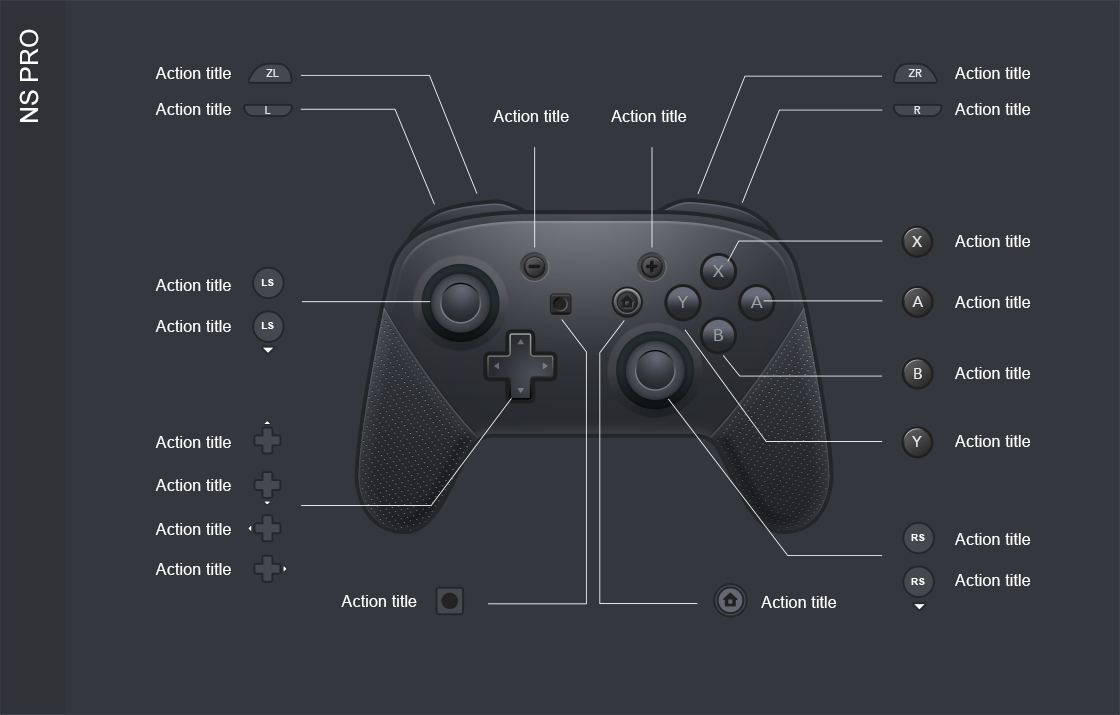
<style>
.page{position:relative;width:1120px;height:715px;background:#35373e}
.page>*{position:absolute;margin:0}
.t1{font:25px "ArialMT";color:#ffffff}
.t2{font:16.4px "ArialMT";color:#ffffff}
.t3{font:10.9px "Avenir-Medium";color:#e7e9eb}
.t4{font:15.5px "Avenir-Medium";color:#e7e9eb}
.t5{font:16.7px "Avenir-Roman";color:#9aa0a3}
.t6{font:10.5px "Arial-BoldMT";color:#ffffff}
</style>
<div class="page">
<p class="t1" style="left:19px;top:29px;width:20px;height:93px;rotate:-90deg">NS PRO</p>
<p class="t2" style="left:155px;top:67px;width:76px;height:12px">Action title</p>
<p class="t3" style="left:266px;top:69px;width:13px;height:8px">ZL</p>
<p class="t3" style="left:908px;top:69px;width:14px;height:8px">ZR</p>
<p class="t2" style="left:955px;top:67px;width:76px;height:12px">Action title</p>
<p class="t2" style="left:155px;top:103px;width:76px;height:12px">Action title</p>
<p class="t3" style="left:265px;top:106px;width:6px;height:8px">L</p>
<p class="t2" style="left:493px;top:110px;width:76px;height:12px">Action title</p>
<p class="t2" style="left:611px;top:110px;width:76px;height:12px">Action title</p>
<p class="t3" style="left:914px;top:106px;width:7px;height:8px">R</p>
<p class="t2" style="left:955px;top:103px;width:76px;height:12px">Action title</p>
<p class="t4" style="left:912px;top:236px;width:10px;height:11px">X</p>
<p class="t2" style="left:955px;top:235px;width:76px;height:12px">Action title</p>
<p class="t5" style="left:713px;top:265px;width:11px;height:12px">X</p>
<p class="t2" style="left:155px;top:279px;width:76px;height:12px">Action title</p>
<p class="t6" style="left:261px;top:279px;width:13px;height:7px">LS</p>
<p class="t5" style="left:677px;top:296px;width:11px;height:12px">Y</p>
<p class="t5" style="left:750px;top:296px;width:13px;height:12px">A</p>
<p class="t4" style="left:912px;top:296px;width:11px;height:11px">A</p>
<p class="t2" style="left:955px;top:296px;width:76px;height:12px">Action title</p>
<p class="t2" style="left:155px;top:320px;width:76px;height:12px">Action title</p>
<p class="t6" style="left:261px;top:322px;width:13px;height:7px">LS</p>
<p class="t5" style="left:714px;top:329px;width:9px;height:12px">B</p>
<p class="t4" style="left:914px;top:368px;width:8px;height:11px">B</p>
<p class="t2" style="left:955px;top:367px;width:76px;height:12px">Action title</p>
<p class="t2" style="left:155px;top:436px;width:76px;height:12px">Action title</p>
<p class="t4" style="left:912px;top:436px;width:10px;height:11px">Y</p>
<p class="t2" style="left:955px;top:435px;width:76px;height:12px">Action title</p>
<p class="t2" style="left:155px;top:479px;width:76px;height:12px">Action title</p>
<p class="t2" style="left:155px;top:523px;width:76px;height:12px">Action title</p>
<p class="t6" style="left:911px;top:534px;width:14px;height:7px">RS</p>
<p class="t2" style="left:955px;top:533px;width:76px;height:12px">Action title</p>
<p class="t2" style="left:155px;top:563px;width:76px;height:12px">Action title</p>
<p class="t6" style="left:911px;top:578px;width:14px;height:7px">RS</p>
<p class="t2" style="left:955px;top:574px;width:76px;height:12px">Action title</p>
<p class="t2" style="left:341px;top:595px;width:76px;height:12px">Action title</p>
<p class="t2" style="left:761px;top:596px;width:76px;height:12px">Action title</p>
</div>
